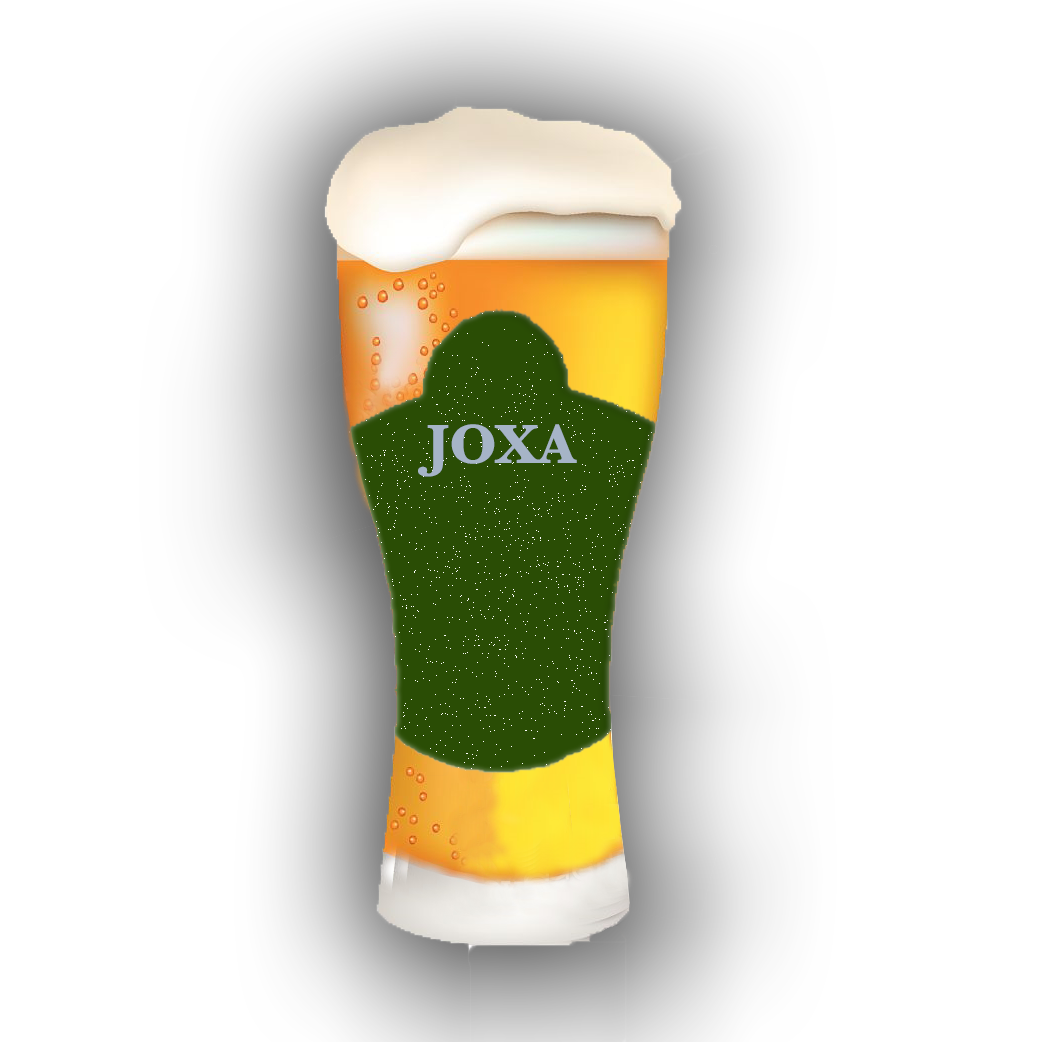
<style>
.page{position:relative;width:1042px;height:1042px;background:#ffffff}
.page>*{position:absolute;margin:0}
.t1{font:57.5px "Baskerville-Bold";color:#a6b4c7}
</style>
<div class="page">
<p class="t1" style="left:418px;top:424px;width:159px;height:53px">JOXA</p>
</div>
